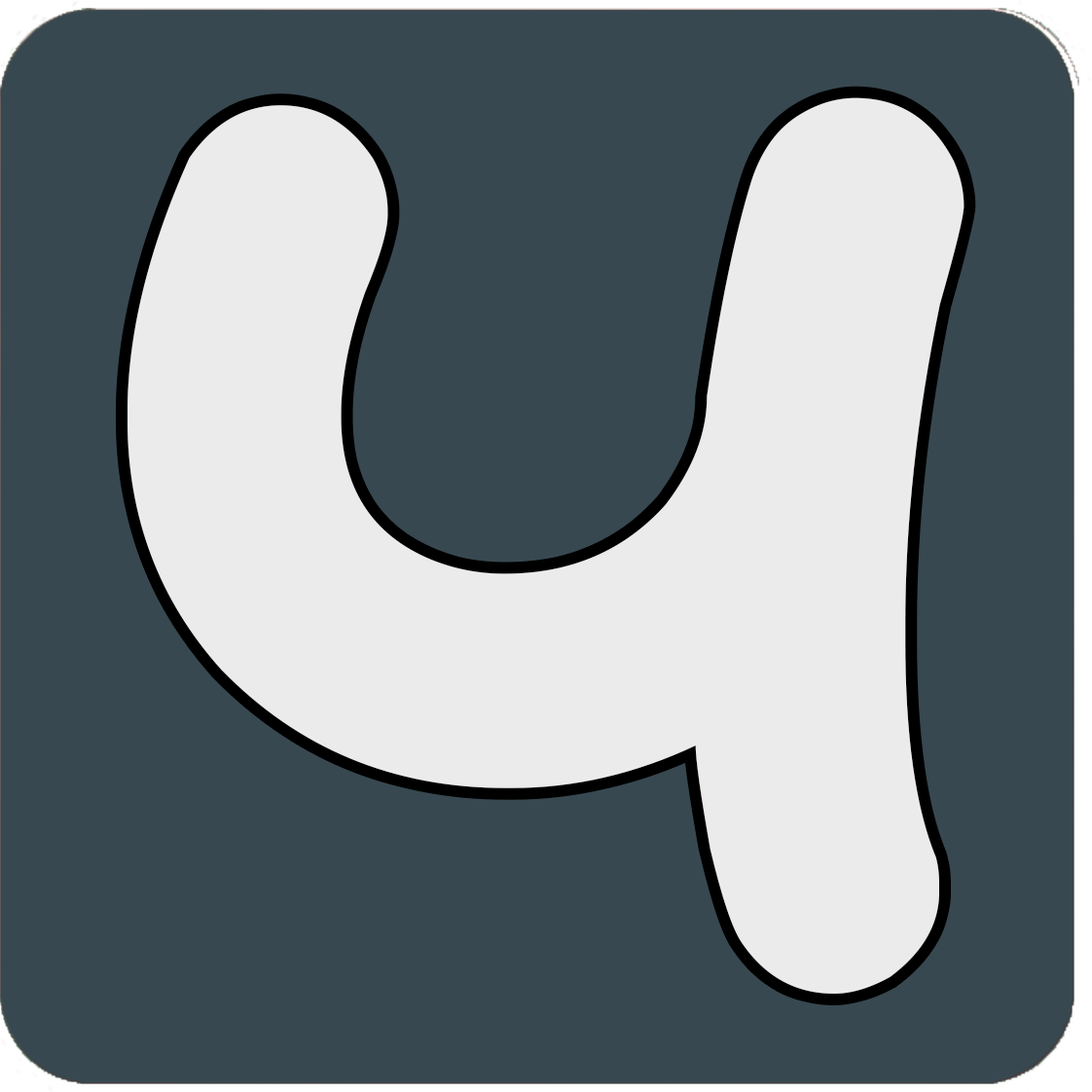
<style>
.page{position:relative;width:1092px;height:1092px;background:#374850}
.page>*{position:absolute;margin:0}
.t1{font:1362.5px "CARTOONIC";color:#ebebeb}
</style>
<div class="page">
<p class="t1" style="left:127px;top:97px;width:837px;height:897px">4</p>
</div>
